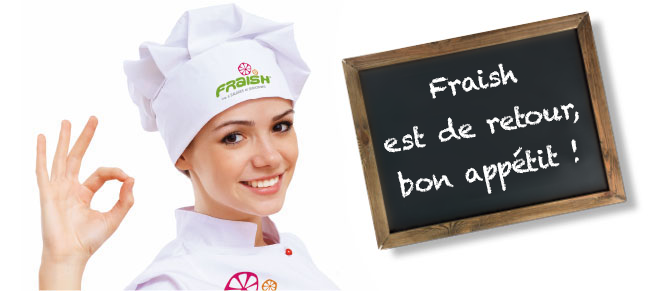
<style>
.page{position:relative;width:667px;height:291px;background:#ffffff}
.page>*{position:absolute;margin:0}
.t1{font:27px/45px "Chalkduster";letter-spacing:-0.03em;color:#ffffff}
</style>
<div class="page">
<p class="t1" style="left:384px;top:63px;width:195px;height:135px;text-align:center;rotate:-11deg">Fraish<br>est de retour,<br>bon appétit !</p>
</div>
